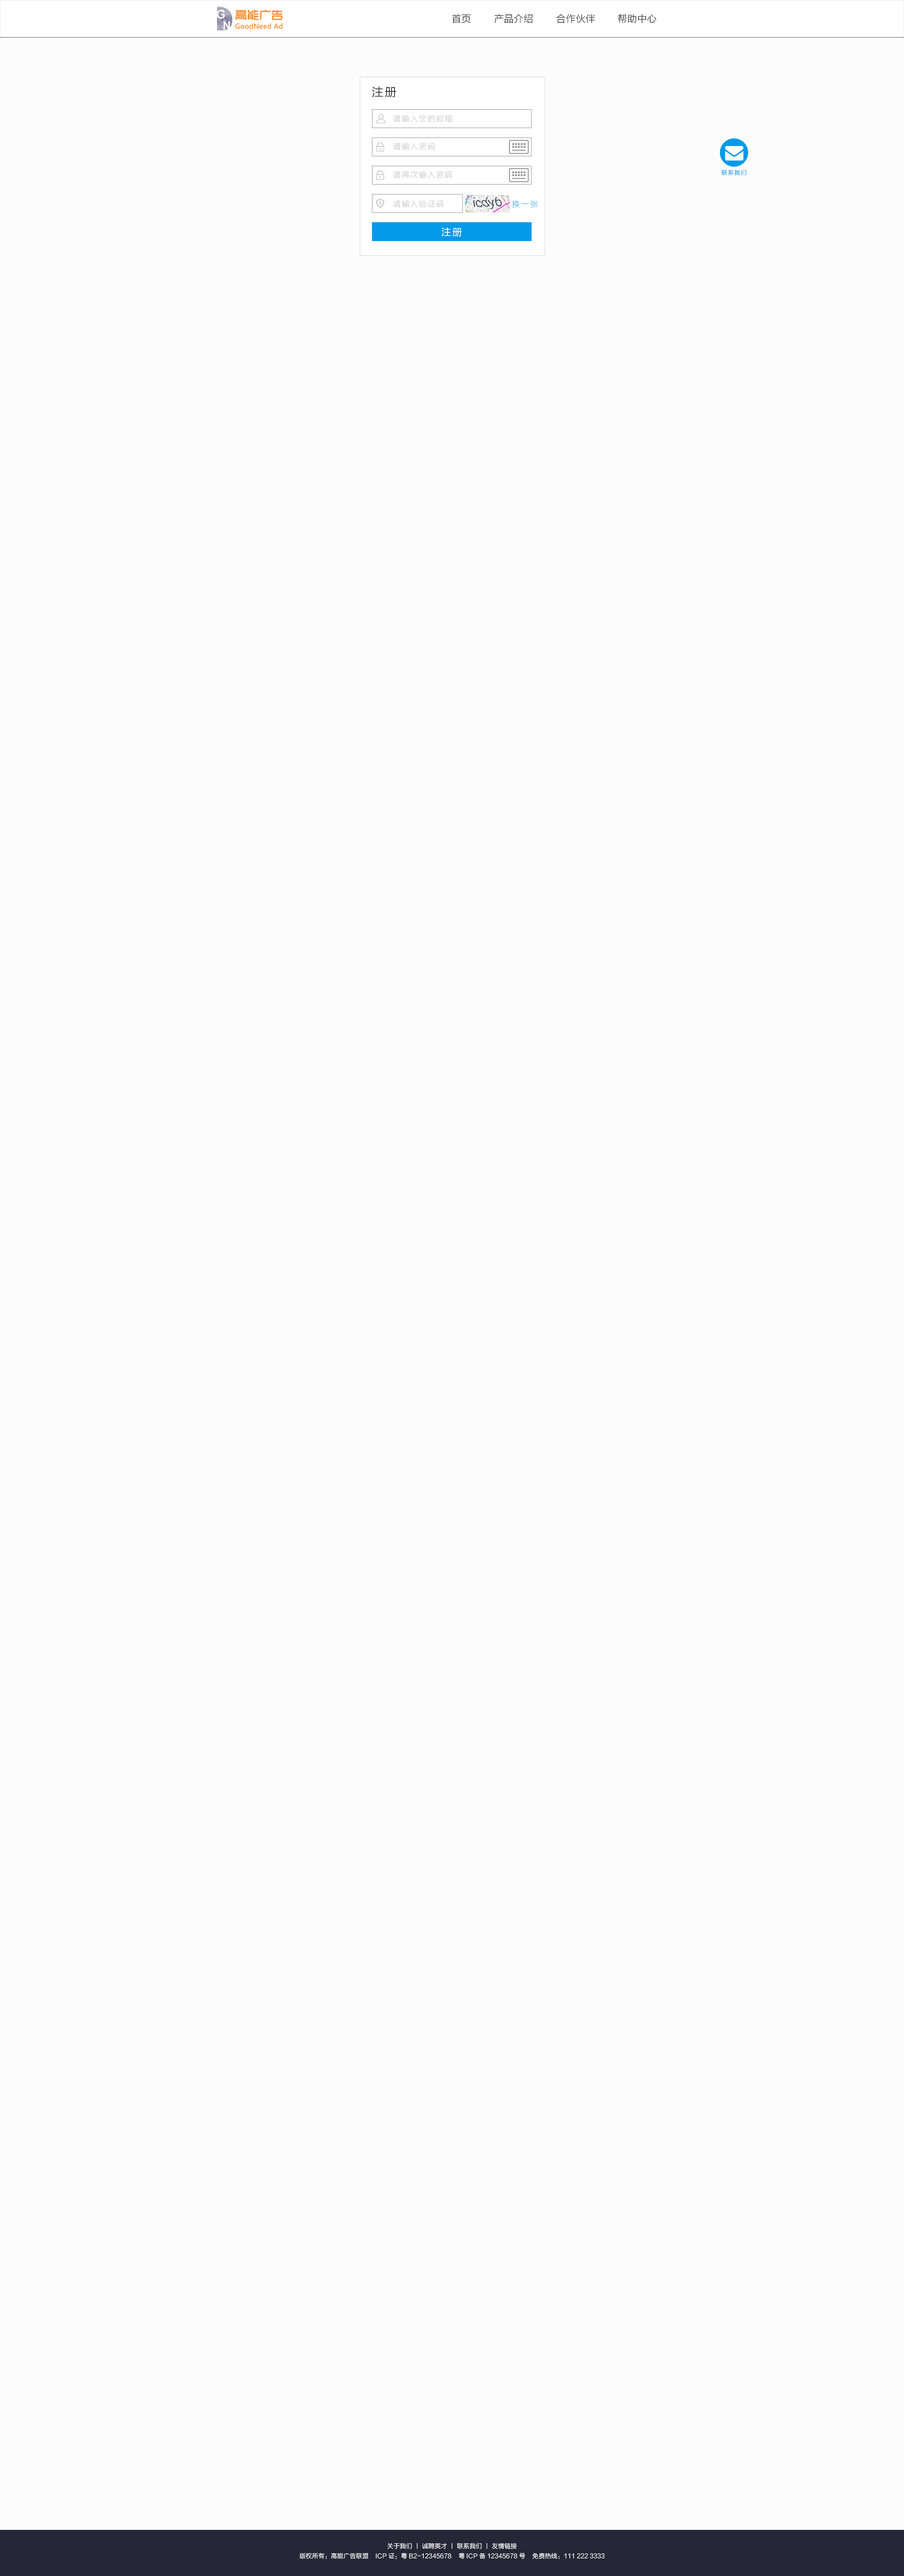
<style>
.page{position:relative;width:904px;height:2576px;background:#fcfcfc}
.page>*{position:absolute;margin:0}
.t1{font:9.8px "FZLTXHK";color:#333333}
.t2{font:11.8px "FZLTHK--GBK1-0";letter-spacing:0.1em;color:#333333}
.t3{font:7.8px "FZLTXHK";letter-spacing:0.1em;color:#cccccc}
.t4{font:5.9px "FZLTXHK";letter-spacing:0.1em;color:#039ae9}
.t5{font:7.8px "FZLTXHK";letter-spacing:0.15em;color:#1ca2e9}
.t6{font:9.8px "FZLTHK--GBK1-0";letter-spacing:0.1em;color:#ffffff}
.t7{font:6.3px "FZLTXHK";color:#ffffff}
</style>
<div class="page">
<p class="t1" style="left:452px;top:14px;width:19px;height:10px">首页</p>
<p class="t1" style="left:494px;top:14px;width:39px;height:10px">产品介绍</p>
<p class="t1" style="left:556px;top:14px;width:39px;height:10px">合作伙伴</p>
<p class="t1" style="left:618px;top:14px;width:38px;height:10px">帮助中心</p>
<p class="t2" style="left:372px;top:86px;width:24px;height:11px">注册</p>
<p class="t3" style="left:393px;top:114px;width:59px;height:8px">请输入您的邮箱</p>
<p class="t3" style="left:393px;top:142px;width:42px;height:8px">请输入密码</p>
<p class="t3" style="left:393px;top:170px;width:59px;height:8px">请再次输入密码</p>
<p class="t4" style="left:721px;top:170px;width:25px;height:6px">联系我们</p>
<p class="t3" style="left:393px;top:200px;width:51px;height:8px">请输入验证码</p>
<p class="t5" style="left:512px;top:200px;width:26px;height:8px">换一张</p>
<p class="t6" style="left:442px;top:227px;width:20px;height:10px">注册</p>
<p class="t7" style="left:387px;top:2543px;width:130px;height:6px">关于我们 丨 诚聘英才 丨 联系我们 丨 友情链接</p>
<p class="t7" style="left:299px;top:2552px;width:306px;height:7px">版权所有：高能广告联盟    ICP证：粤B2-12345678    粤ICP备12345678号    免费热线：111 222 3333</p>
</div>
